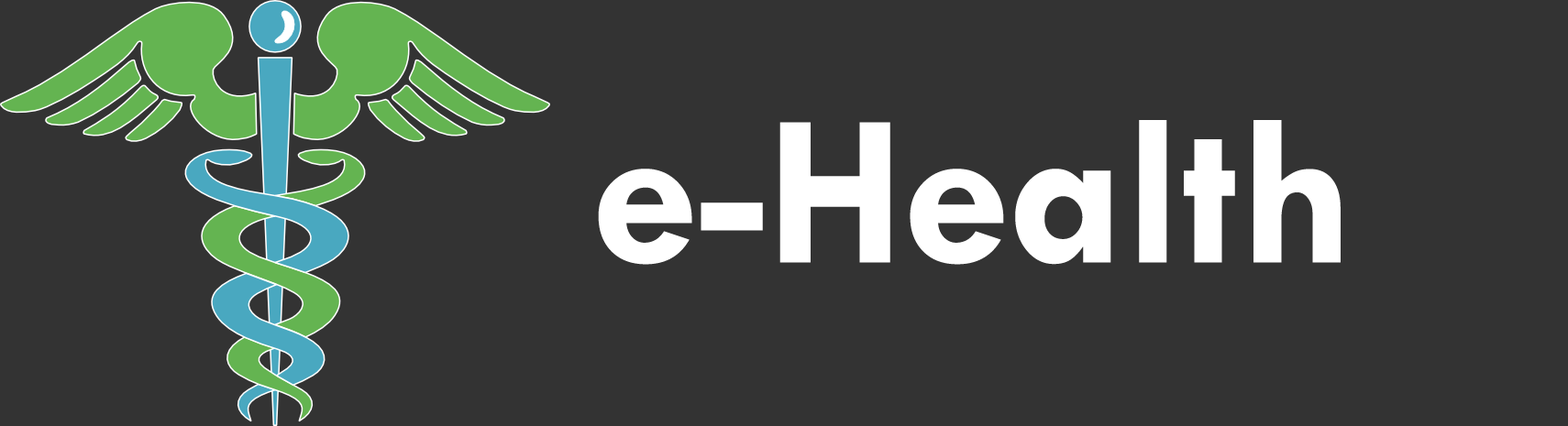
<style>
.page{position:relative;width:1568px;height:426px;background:#333333}
.page>*{position:absolute;margin:0}
.t1{font:218.4px "TwCenMT-Bold";color:#ffffff}
</style>
<div class="page">
<p class="t1" style="left:598px;top:120px;width:743px;height:145px">e-Health System</p>
</div>
